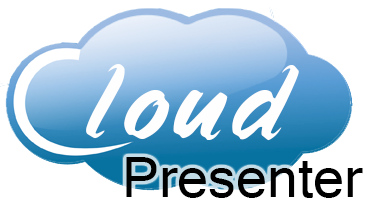
<style>
.page{position:relative;width:374px;height:216px;background:#ffffff}
.page>*{position:absolute;margin:0}
.t1{font:114.1px "Speedline";color:#fefefe}
.t2{font:60px "Gautami";color:#000000}
</style>
<div class="page">
<p class="t1" style="left:86px;top:64px;width:213px;height:77px">loud</p>
<p class="t2" style="left:126px;top:157px;width:237px;height:41px">Presenter</p>
</div>
